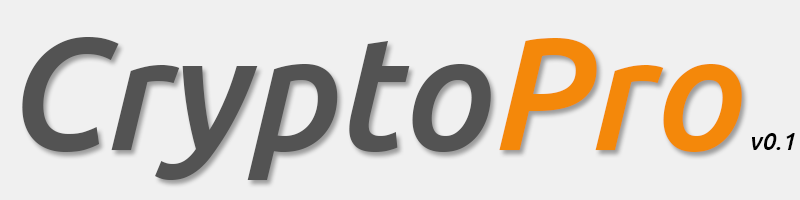
<style>
.page{position:relative;width:800px;height:200px;background:#f0f0f0}
.page>*{position:absolute;margin:0}
.t1{font:160px "Ubuntu-MediumItalic";color:#535353}
.t2{font:160px "Ubuntu-MediumItalic";color:#f4880a}
.t3{font:24px "Ubuntu-MediumItalic";color:#000000}
</style>
<div class="page">
<p class="t1" style="left:22px;top:37px;width:469px;height:143px">Crypto</p>
<p class="t2" style="left:499px;top:38px;width:243px;height:114px">Pro</p>
<p class="t3" style="left:752px;top:133px;width:43px;height:17px">v0.1</p>
</div>
